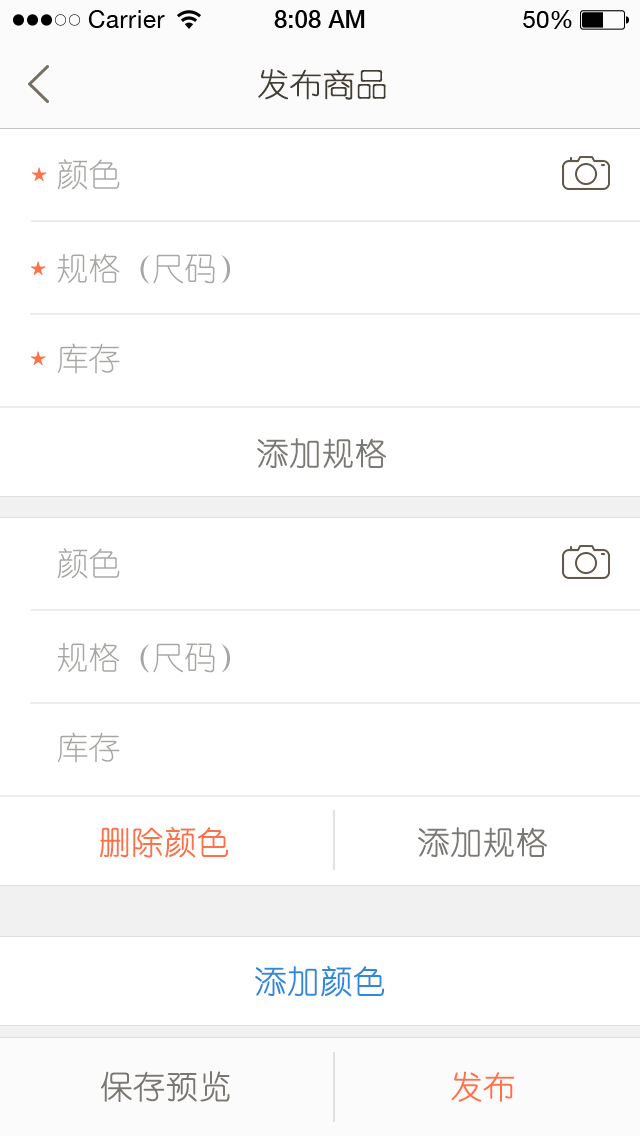
<style>
.page{position:relative;width:640px;height:1136px;background:#ffffff}
.page>*{position:absolute;margin:0}
.t1{font:32px "YouYuan";color:#433d33;text-transform:uppercase;font-weight:bold}
.t2{font:32px "YouYuan";color:#a7a6a3;text-transform:uppercase}
.t3{font:32px "YouYuan";color:#7b7973;text-transform:uppercase;font-weight:bold}
.t4{font:32px "YouYuan";color:#ff7248;text-transform:uppercase;font-weight:bold}
.t5{font:32px "YouYuan";color:#2f88da;text-transform:uppercase;font-weight:bold}
.t6{font:32px "YouYuan";color:#7a7772;text-transform:uppercase;font-weight:bold}
</style>
<div class="page">
<p class="t1" style="left:258px;top:69px;width:128px;height:31px">发布商品</p>
<p class="t2" style="left:57px;top:159px;width:63px;height:31px">颜色</p>
<p class="t2" style="left:57px;top:254px;width:173px;height:30px">规格（尺码）</p>
<p class="t2" style="left:57px;top:343px;width:63px;height:31px">库存</p>
<p class="t3" style="left:257px;top:438px;width:129px;height:31px">添加规格</p>
<p class="t2" style="left:57px;top:548px;width:63px;height:31px">颜色</p>
<p class="t2" style="left:57px;top:643px;width:173px;height:30px">规格（尺码）</p>
<p class="t2" style="left:57px;top:732px;width:63px;height:31px">库存</p>
<p class="t4" style="left:100px;top:827px;width:128px;height:31px">删除颜色</p>
<p class="t3" style="left:418px;top:827px;width:129px;height:31px">添加规格</p>
<p class="t5" style="left:255px;top:966px;width:129px;height:31px">添加颜色</p>
<p class="t6" style="left:101px;top:1071px;width:129px;height:31px">保存预览</p>
<p class="t4" style="left:451px;top:1071px;width:64px;height:31px">发布</p>
</div>
